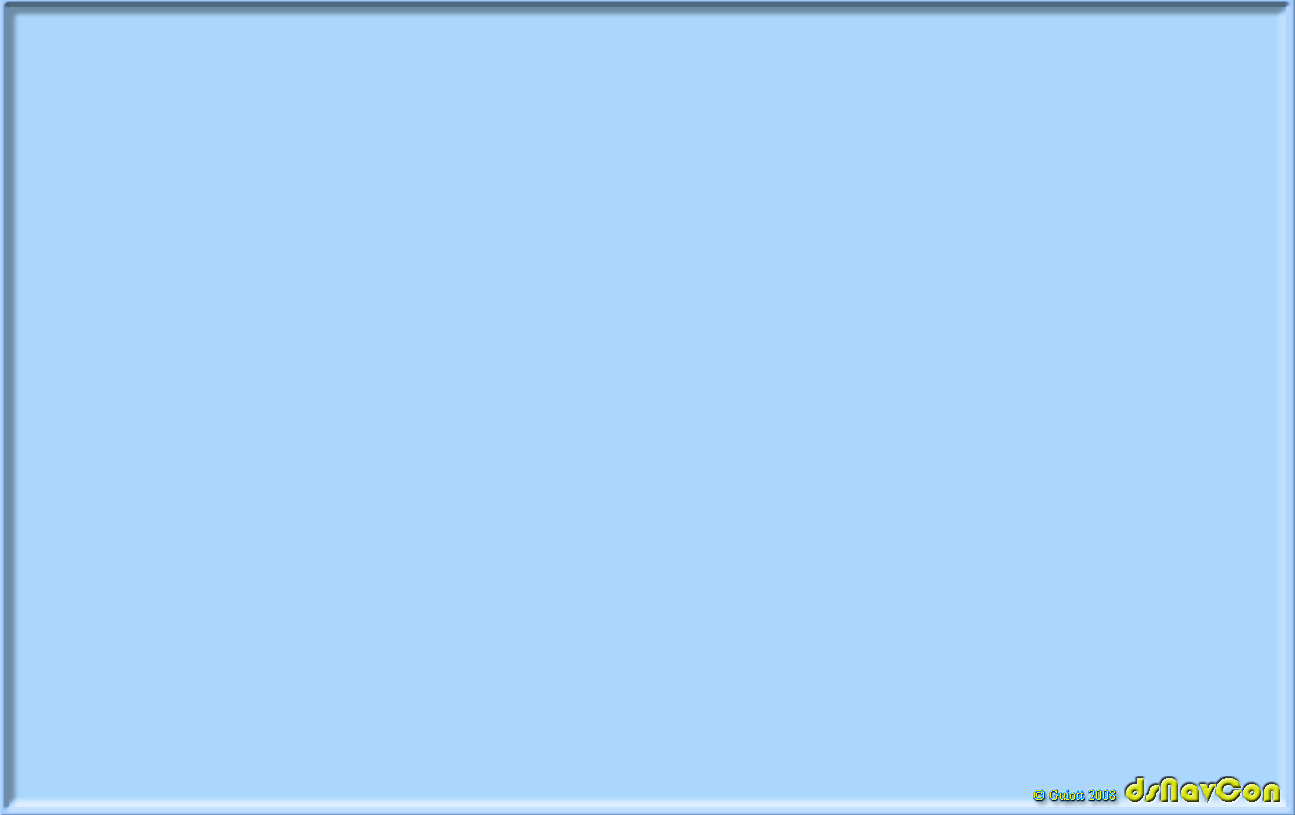
<style>
.page{position:relative;width:1295px;height:815px;background:#abd7fe}
.page>*{position:absolute;margin:0}
.t1{font:36px "Bauhaus93"}
.t2{font:14px "TimesNewRomanPSMT"}
</style>
<div class="page">
<p class="t1" style="left:1126px;top:778px;width:154px;height:25px">dsNavCon</p>
<p class="t2" style="left:1034px;top:790px;width:81px;height:10px">© Guiott 2008</p>
</div>
